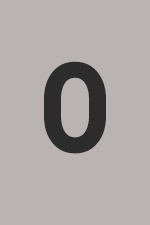
<style>
.page{position:relative;width:150px;height:225px;background:#b9b3b3}
.page>*{position:absolute;margin:0}
.t1{font:125px "Roboto-Black";color:#2c2c2c;scale:0.82 1}
</style>
<div class="page">
<p class="t1" style="left:44px;top:61px;width:62px;height:93px">O</p>
</div>
